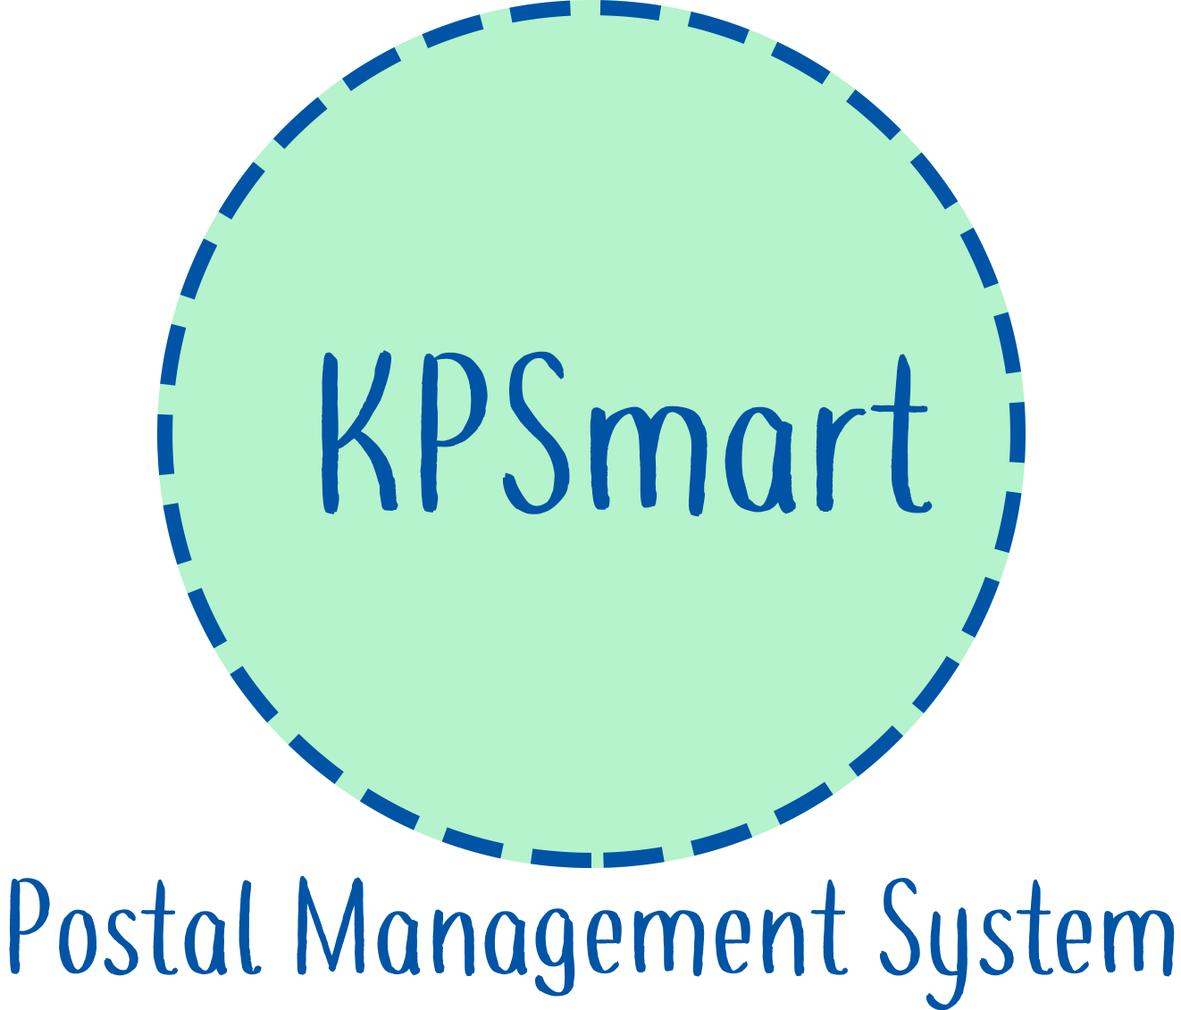
<style>
.page{position:relative;width:1181px;height:1010px;background:#ffffff}
.page>*{position:absolute;margin:0}
.t1{font:223.3px "coffee+teademo-Regular";color:#0054a6}
.t2{font:134px "coffee+teademo-Regular";color:#0054a6}
</style>
<div class="page">
<p class="t1" style="left:321px;top:350px;width:611px;height:167px">KPSmart</p>
<p class="t2" style="left:9px;top:875px;width:1165px;height:136px">Postal Management System</p>
</div>
